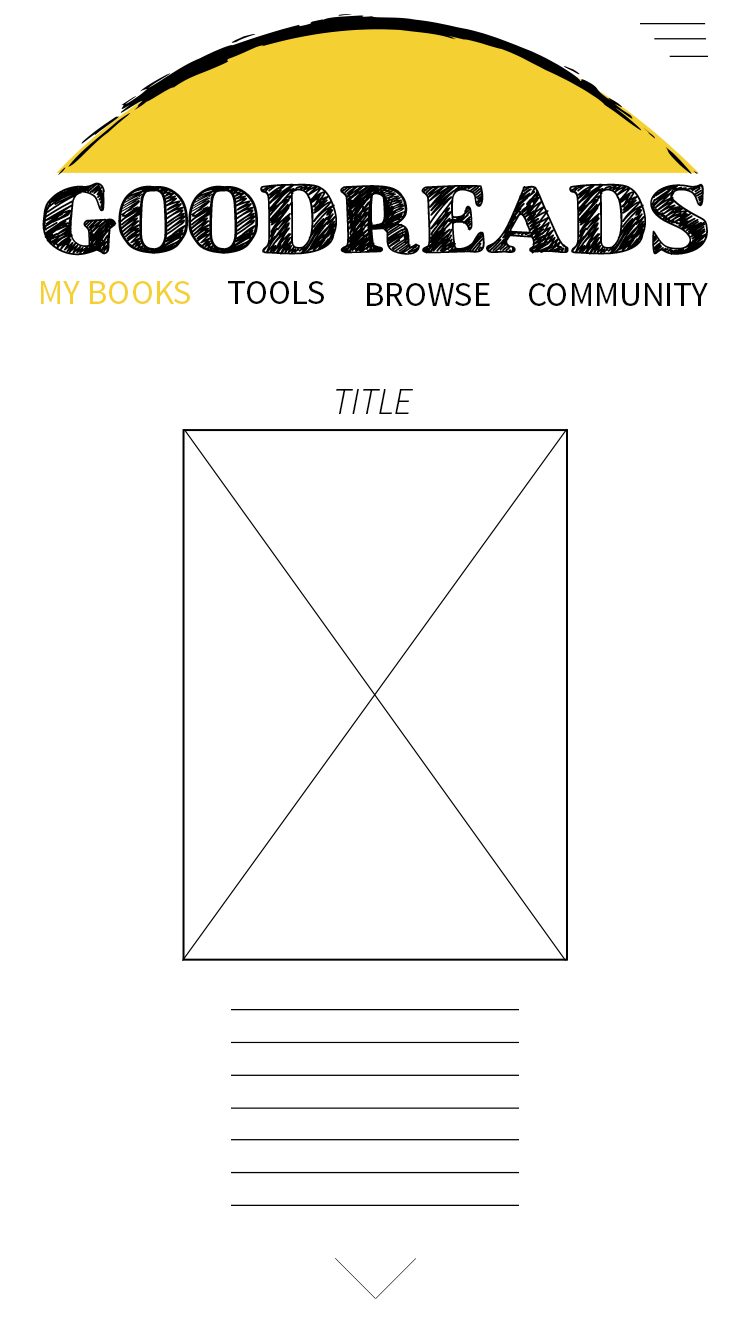
<style>
.page{position:relative;width:750px;height:1334px;background:#ffffff}
.page>*{position:absolute;margin:0}
.t1{font:35px "SourceSansPro-Regular";color:#f5d032}
.t2{font:35px "SourceSansPro-Regular";color:#000000}
.t3{font:36.8px "SourceSansPro-LightIt";color:#010100}
</style>
<div class="page">
<p class="t1" style="left:41px;top:281px;width:283px;height:23px">MY BOOKS<span class="t2">     TOOLS</span></p>
<p class="t2" style="left:367px;top:283px;width:341px;height:23px">BROWSE     COMMUNITY</p>
<p class="t3" style="left:336px;top:389px;width:77px;height:25px">TITLE</p>
</div>
